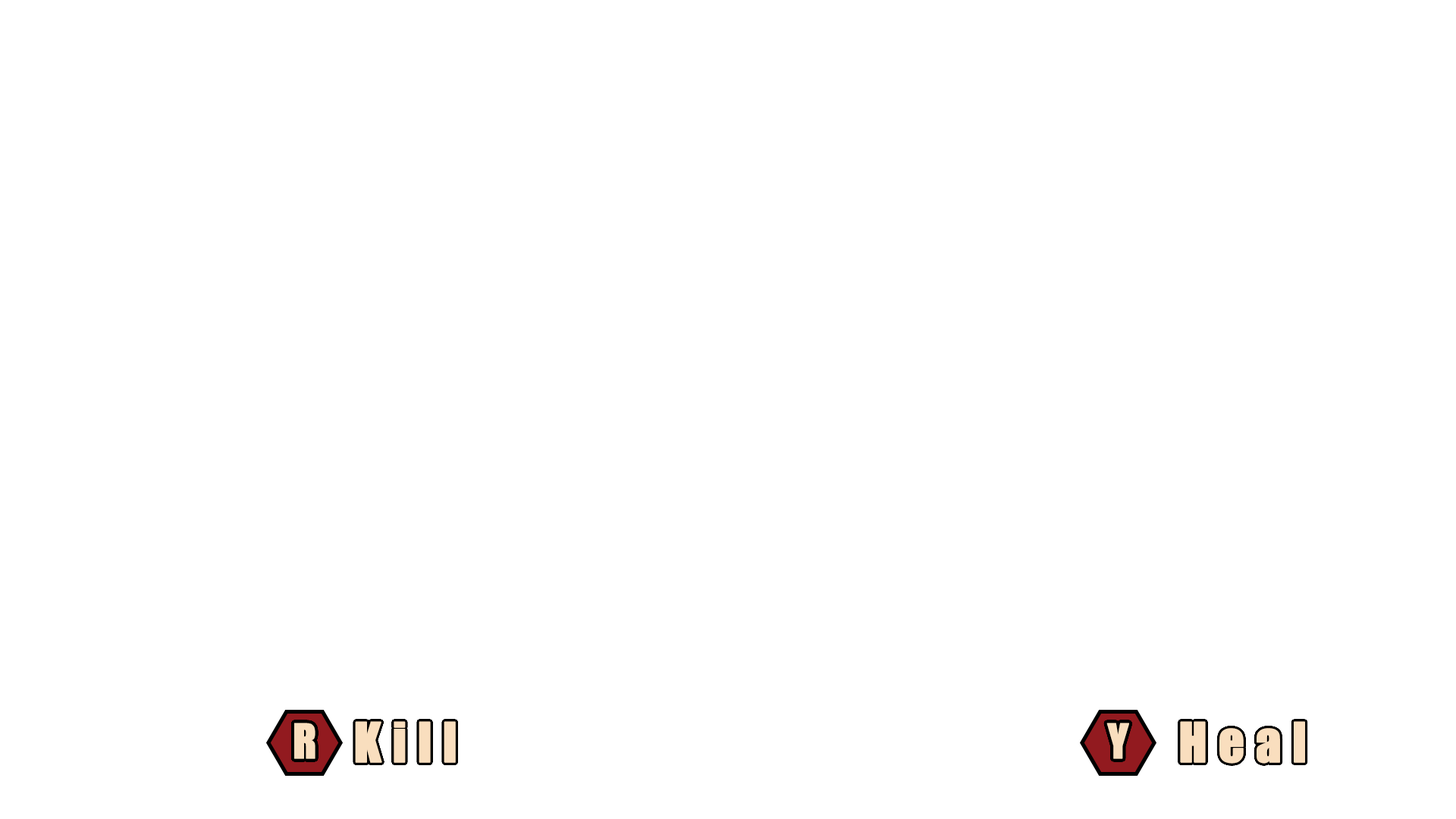
<style>
.page{position:relative;width:1456px;height:819px;background:#ffffff}
.page>*{position:absolute;margin:0}
.t1{font:44.2px "Impact";letter-spacing:0.2em;color:#f9debe;font-weight:bold}
.t2{font:50.6px "Impact";letter-spacing:0.2em;color:#f9debe;font-weight:bold}
</style>
<div class="page">
<p class="t1" style="left:294px;top:723px;width:21px;height:36px">R</p>
<p class="t2" style="left:355px;top:721px;width:101px;height:42px">Kill</p>
<p class="t1" style="left:1106px;top:723px;width:23px;height:36px">Y</p>
<p class="t2" style="left:1180px;top:721px;width:125px;height:43px">Heal</p>
</div>
